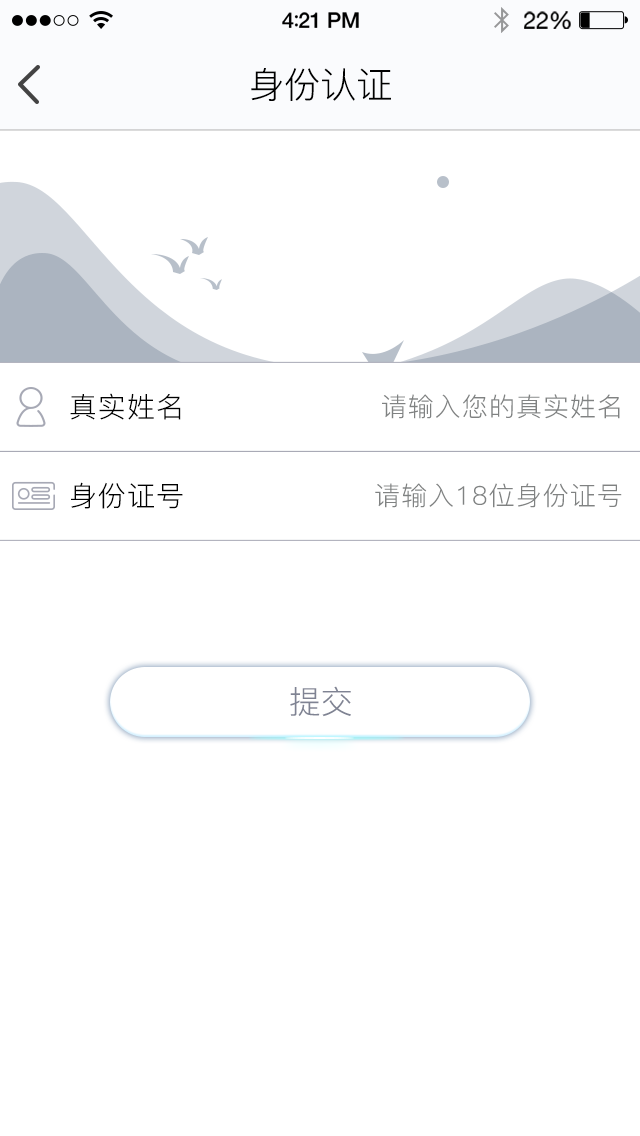
<style>
.page{position:relative;width:640px;height:1136px;background:#ffffff}
.page>*{position:absolute;margin:0}
.t1{font:36px "PingFang-SC-Regular";color:#000000}
.t2{font:28px "PingFang-SC-Regular";letter-spacing:0.04em;color:#000000}
.t3{font:26px "PingFang-SC-Regular";letter-spacing:0.04em;color:#808282}
.t4{font:32px "PingFang-SC-Regular";color:#7f8393}
</style>
<div class="page">
<p class="t1" style="left:251px;top:68px;width:140px;height:33px">身份认证</p>
<p class="t2" style="left:70px;top:393px;width:111px;height:27px">真实姓名</p>
<p class="t3" style="left:382px;top:394px;width:238px;height:25px">请输入您的真实姓名</p>
<p class="t2" style="left:71px;top:482px;width:112px;height:27px">身份证号</p>
<p class="t3" style="left:375px;top:483px;width:247px;height:25px">请输入18位身份证号</p>
<p class="t4" style="left:290px;top:686px;width:61px;height:31px">提交</p>
</div>
